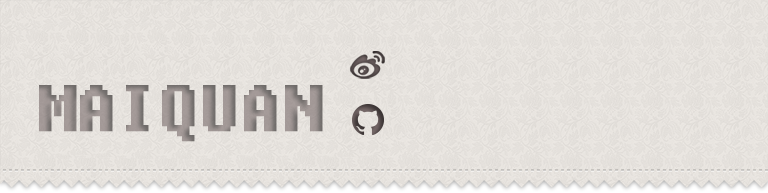
<style>
.page{position:relative;width:768px;height:193px}
.page>*{position:absolute;margin:0}
.t1{font:80px "Fixedsys";letter-spacing:0.01em;color:#9a918f;text-transform:uppercase;font-weight:bold}
</style>
<div class="page">
<p class="t1" style="left:39px;top:85px;width:284px;height:57px">maiquan</p>
</div>
